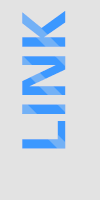
<style>
.page{position:relative;width:100px;height:200px;background:#e3e3e3}
.page>*{position:absolute;margin:0}
.t1{font:59px "FZZYJW--GB1-0";letter-spacing:0.04em;color:#3c98ff}
</style>
<div class="page">
<p class="t1" style="left:22px;top:11px;width:44px;height:138px;rotate:-90deg">LINK</p>
</div>
